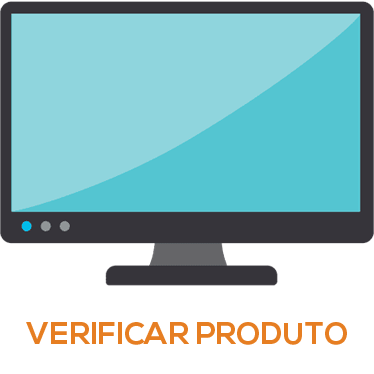
<style>
.page{position:relative;width:374px;height:374px;background:#ffffff}
.page>*{position:absolute;margin:0}
.t1{font:30.8px "NexaBold";color:#e67e22}
</style>
<div class="page">
<p class="t1" style="left:26px;top:322px;width:321px;height:23px">VERIFICAR PRODUTO</p>
</div>
